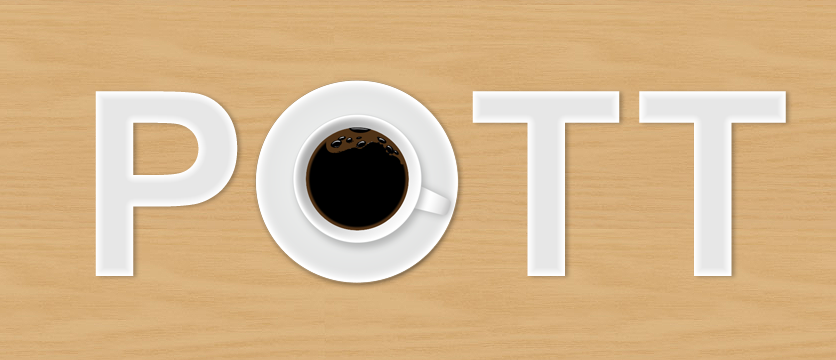
<style>
.page{position:relative;width:836px;height:360px}
.page>*{position:absolute;margin:0}
.t1{font:257.7px "Arial-BoldMT";letter-spacing:0.035em;color:#e7e7e7}
</style>
<div class="page">
<p class="t1" style="left:95px;top:88px;width:691px;height:192px">POTT</p>
</div>
